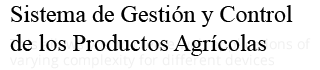
<style>
.page{position:relative;width:320px;height:70px;background:#ffffff}
.page>*{position:absolute;margin:0}
.t1{font:24px "TimesNewRomanPSMT";color:#000000}
</style>
<div class="page">
<p class="t1" style="left:10px;top:2px;width:300px;height:56px">Sistema de Gestión y Control de los Productos Agrícolas</p>
</div>
